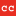
<style>
.page{position:relative;width:16px;height:16px;background:#e82e21}
.page>*{position:absolute;margin:0}
.t1{font:12px "AnonymousPro-Bold";letter-spacing:0.05em;color:#ffffff}
</style>
<div class="page">
<p class="t1" style="left:1px;top:5px;width:13px;height:7px">cc</p>
</div>
